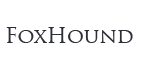
<style>
.page{position:relative;width:142px;height:70px;background:#ffffff}
.page>*{position:absolute;margin:0}
.t1{font:21px "TrajanPro-Regular";color:#2c2e38}
</style>
<div class="page">
<p class="t1" style="left:6px;top:27px;width:127px;height:16px">FoxHound</p>
</div>
